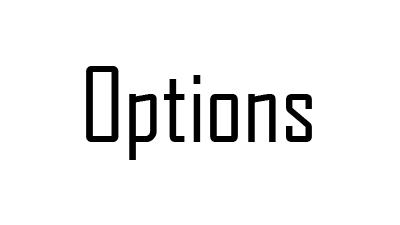
<style>
.page{position:relative;width:400px;height:225px;background:#ffffff}
.page>*{position:absolute;margin:0}
.t1{font:100px "AgencyFB-Reg";color:#000000}
</style>
<div class="page">
<p class="t1" style="left:86px;top:66px;width:226px;height:94px">Options</p>
</div>
